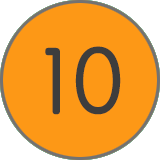
<style>
.page{position:relative;width:160px;height:160px;background:#fd9816}
.page>*{position:absolute;margin:0}
.t1{font:96px "STYuanti-SC-Regular";color:#3d3d3d}
</style>
<div class="page">
<p class="t1" style="left:45px;top:46px;width:76px;height:69px">10</p>
</div>
